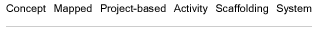
<style>
.page{position:relative;width:316px;height:30px;background:#ffffff}
.page>*{position:absolute;margin:0}
.t1{font:17px "Kartika";color:#000000}
</style>
<div class="page">
<p class="t1" style="left:6px;top:4px;width:306px;height:11px">Concept Mapped Project-based Activity Scaffolding System</p>
</div>
